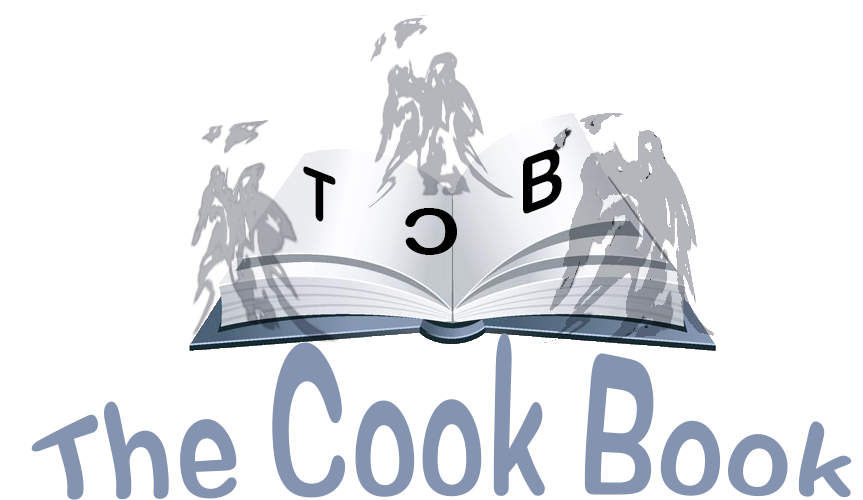
<style>
.page{position:relative;width:863px;height:500px;background:#ffffff}
.page>*{position:absolute;margin:0}
.t1{font:78.3px "ArialRoundedMTBold";color:#000000;scale:0.89 1}
.t2{font:67.9px "ArialRoundedMTBold";color:#000000;scale:0.83 1}
.t3{font:63.3px "ArialRoundedMTBold";color:#000000;scale:1.28 1}
.t4{font:104.2px "ArialRoundedMTBold";color:#8493b0}
</style>
<div class="page">
<p class="t1" style="left:523px;top:149px;width:39px;height:65px;rotate:-21deg">B</p>
<p class="t2" style="left:303px;top:166px;width:33px;height:56px;rotate:21deg">T</p>
<p class="t3" style="left:405px;top:208px;width:53px;height:47px;rotate:180deg">C</p>
<p class="t4" style="left:31px;top:333px;width:821px;height:167px">The Cook Book</p>
</div>
